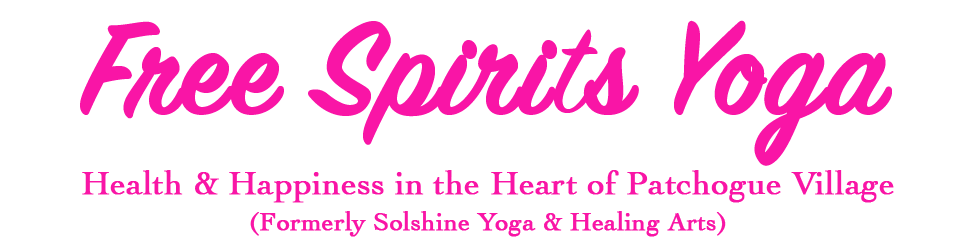
<style>
.page{position:relative;width:960px;height:250px;background:#ffffff}
.page>*{position:absolute;margin:0}
.t1{font:142px "SignPainter-HouseScript";color:#f915a6;font-weight:bold}
.t2{font:142px "SignPainter-HouseScript";color:#f915a6;text-transform:uppercase;font-weight:bold}
.t3{font:34px/36px "Cochin";color:#f915a6;font-weight:bold}
.t4{font:26px/36px "Cochin";color:#f915a6;font-weight:bold}
</style>
<div class="page">
<p class="t1" style="left:80px;top:20px;width:812px;height:146px"><span class="t2">F</span>ree Spirits Yoga</p>
<p class="t3" style="left:82px;top:170px;width:812px;height:67px;text-align:center">Health &amp; Happiness in the Heart of Patchogue Village<br><span class="t4">(Formerly Solshine Yoga &amp; Healing Arts)</span></p>
</div>
